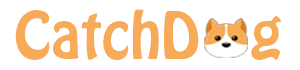
<style>
.page{position:relative;width:300px;height:70px;background:#ffffff}
.page>*{position:absolute;margin:0}
.t1{font:57.9px "HoboStd";color:#f7aa58}
</style>
<div class="page">
<p class="t1" style="left:15px;top:9px;width:267px;height:51px">CatchD   g</p>
</div>
